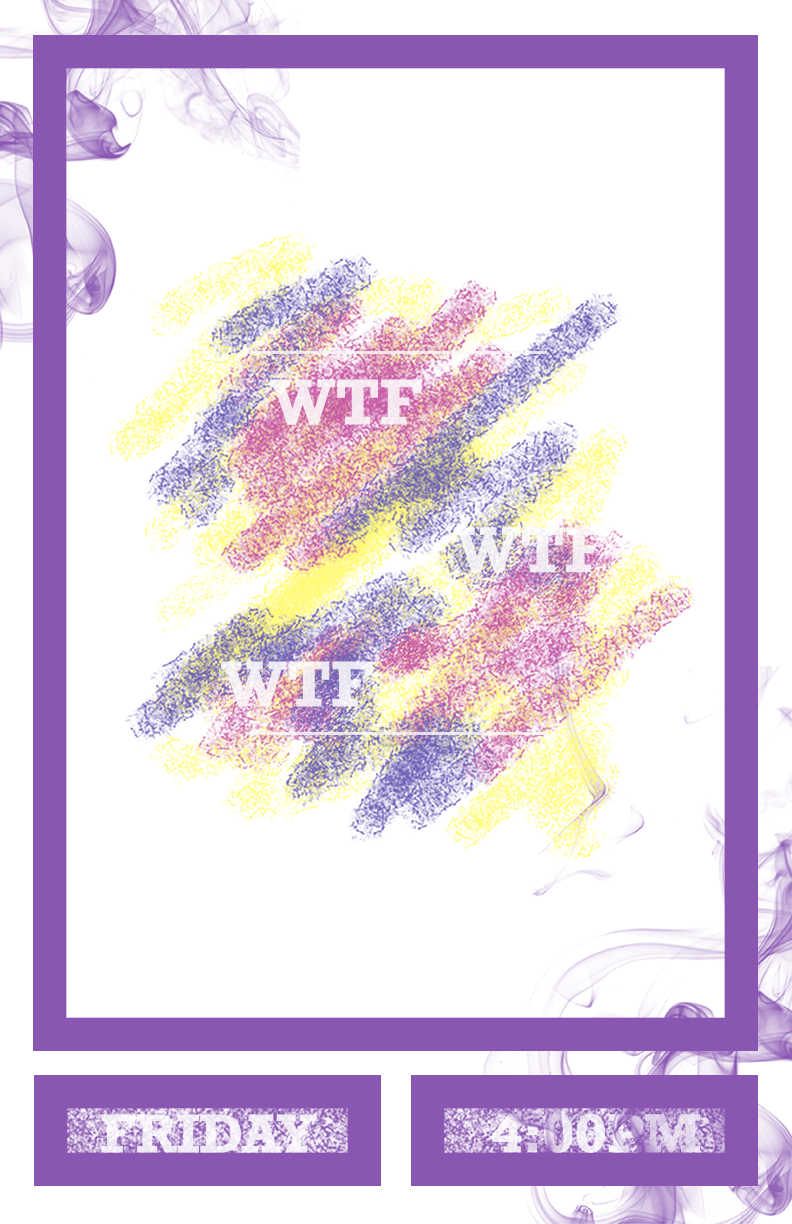
<style>
.page{position:relative;width:792px;height:1224px;background:#ffffff}
.page>*{position:absolute;margin:0}
.t1{font:61px "Rockwell-Bold";color:#ffffff}
.t2{font:51.4px "Rockwell-Bold";color:#ffffff}
.t3{font:51.4px "Rockwell-Bold"}
</style>
<div class="page">
<p class="t1" style="left:269px;top:379px;width:153px;height:46px;opacity:0.8">WTF</p>
<p class="t1" style="left:454px;top:527px;width:153px;height:46px;opacity:0.8">WTF</p>
<p class="t1" style="left:221px;top:661px;width:152px;height:46px;opacity:0.8">WTF</p>
<p class="t2" style="left:101px;top:1114px;width:216px;height:39px;opacity:0.8">FRIDAY</p>
<p class="t3" style="left:490px;top:1113px;width:210px;height:40px">4:00PM</p>
</div>
